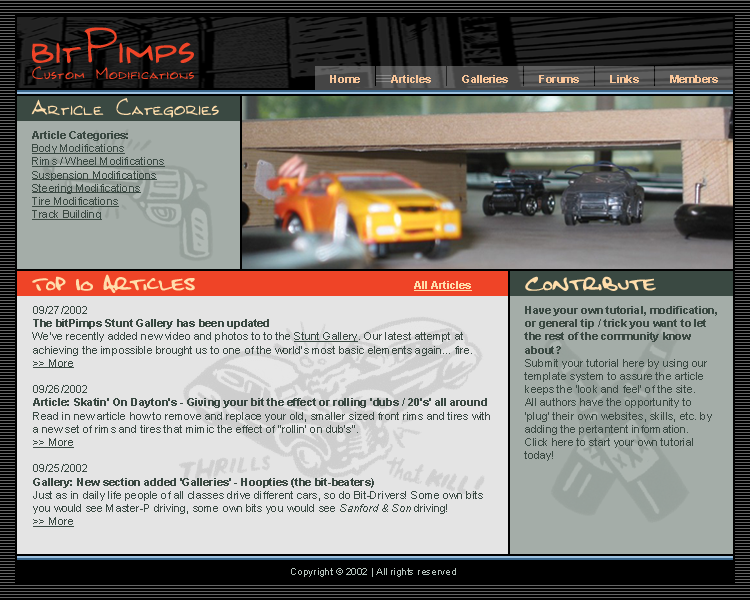
<style>
.page{position:relative;width:750px;height:600px}
.page>*{position:absolute;margin:0}
.t1{font:52px "Kilroy-WasHere";color:#ef4427}
.t2{font:18px "Kilroy-WasHere";letter-spacing:0.035em;color:#ef4427}
.t3{font:11px "Arial-BoldMT";color:#f8c599}
.t4{font:24px "Kilroy-WasHere";color:#ffddab}
.t5{font:11px "ArialMT";color:#3a4942;text-decoration:underline}
.t6{font:11px "Arial-BoldMT";color:#3a4942}
.t7{font:20px "FatboySlimBLTC(BRK)";color:#ffddab}
.t8{font:11px "Arial-BoldMT";color:#ffddab;text-decoration:underline}
.t9{font:11px "ArialMT";color:#3a4942}
.t10{font:11px "Arial-ItalicMT";color:#3a4942}
.t11{font:10px "ArialMT";color:#b6c4bd}
</style>
<div class="page">
<p class="t1" style="left:32px;top:27px;width:162px;height:37px">bitPimps</p>
<p class="t2" style="left:32px;top:66px;width:162px;height:14px">Custom Modifications</p>
<p class="t3" style="left:330px;top:75px;width:30px;height:8px">Home</p>
<p class="t3" style="left:391px;top:75px;width:40px;height:8px">Articles</p>
<p class="t3" style="left:462px;top:75px;width:46px;height:8px">Galleries</p>
<p class="t3" style="left:539px;top:75px;width:40px;height:8px">Forums</p>
<p class="t3" style="left:610px;top:75px;width:29px;height:8px">Links</p>
<p class="t3" style="left:670px;top:75px;width:48px;height:8px">Members</p>
<p class="t4" style="left:31px;top:98px;width:188px;height:20px">Article Categories</p>
<p class="t5" style="left:32px;top:131px;width:133px;height:89px"><span class="t6">Article Categories:<br></span>Body Modifications<br>Rims / Wheel Modifications<br>Suspension Modifications<br>Steering Modifications<br>Tire Modifications<br>Track Building</p>
<p class="t7" style="left:32px;top:274px;width:163px;height:19px">Top 10 Articles</p>
<p class="t8" style="left:414px;top:281px;width:58px;height:10px">All Articles</p>
<p class="t7" style="left:525px;top:276px;width:131px;height:15px">Contribute</p>
<p class="t9" style="left:32px;top:306px;width:458px;height:221px">09/27/2002<br><span class="t6">The bitPimps Stunt Gallery has been updated<br></span>We've recently added new video and photos to to the <span class="t5">Stunt Gallery</span>. Our latest attempt at<br>achieving the impossible brought us to one of the world's most basic elements again... fire.<br><span class="t5">&gt;&gt; More<br></span><br>09/26/2002<br><span class="t6">Article: Skatin' On Dayton's - Giving your bit the effect or rolling 'dubs / 20's' all around<br></span>Read in new article how to remove and replace your old, smaller sized front rims and tires with<br>a new set of rims and tires that mimic the effect of "rollin' on dub's".<br><span class="t5">&gt;&gt; More<br></span><br>09/25/2002<br><span class="t6">Gallery: New section added 'Galleries' - Hoopties (the bit-beaters)<br></span>Just as in daily life people of all classes drive different cars, so do Bit-Drivers! Some own bits<br>you would see Master-P driving, some own bits you would see <span class="t10">Sanford &amp; Son</span> driving!<br><span class="t5">&gt;&gt; More</span></p>
<p class="t9" style="left:524px;top:306px;width:193px;height:155px"><span class="t6">Have your own tutorial, modification,<br>or general tip / trick you want to let<br>the rest of the community know<br>about?<br></span>Submit your tutorial here by using our<br>template system to assure the article<br>keeps the 'look and feel' of the site.<br>All authors have the opportunity to<br>'plug' their own websites, skills, etc. by<br>adding the pertantent information.<br>Click here to start your own tutorial<br>today!</p>
<p class="t11" style="left:291px;top:568px;width:165px;height:9px">Copyright © 2002 | All rights reserved</p>
</div>
